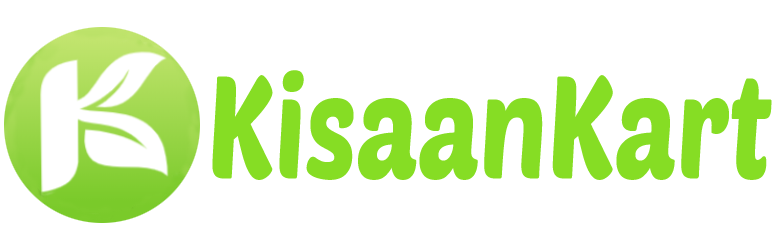
<style>
.page{position:relative;width:779px;height:241px;background:#ffffff}
.page>*{position:absolute;margin:0}
.t1{font:143.1px "PoetsenOne-Regular";color:#86dd24;scale:0.76 1}
</style>
<div class="page">
<p class="t1" style="left:212px;top:70px;width:560px;height:110px">KisaanKart</p>
</div>
